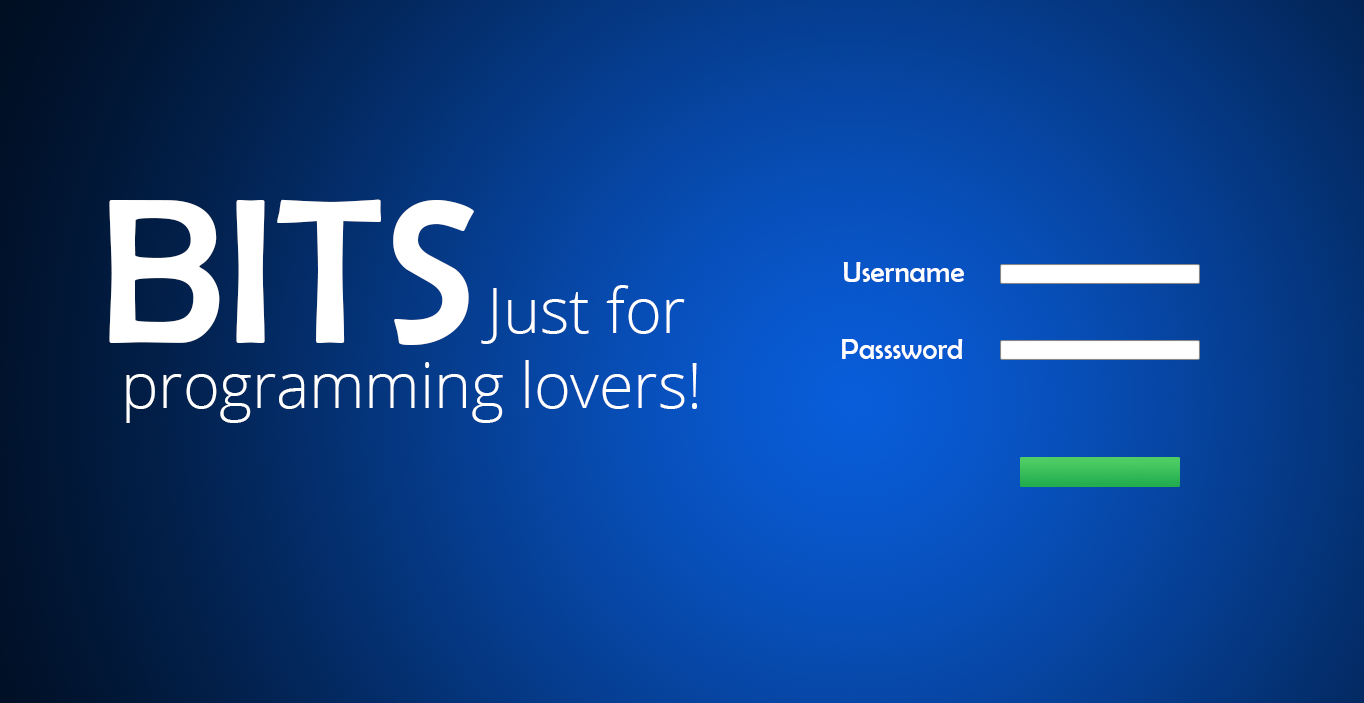
<style>
.page{position:relative;width:1364px;height:703px}
.page>*{position:absolute;margin:0}
.t1{font:208.3px "BerlinSansFB-Reg";color:#ffffff}
.t2{font:29.2px "BerlinSansFB-Reg";color:#ffffff}
.t3{font:62.5px "OpenSans-Light";color:#ffffff}
</style>
<div class="page">
<p class="t1" style="left:109px;top:199px;width:365px;height:146px">BITS</p>
<p class="t2" style="left:843px;top:262px;width:121px;height:20px">Username</p>
<p class="t3" style="left:126px;top:285px;width:571px;height:138px;text-align:right">Just for <br>programming lovers!</p>
<p class="t2" style="left:842px;top:339px;width:121px;height:20px">Passsword</p>
</div>
